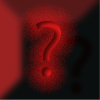
<style>
.page{position:relative;width:100px;height:100px}
.page>*{position:absolute;margin:0}
.t1{font:80px "MyriadPro-Regular"}
</style>
<div class="page">
<p class="t1" style="left:36px;top:21px;width:25px;height:56px">?</p>
</div>
